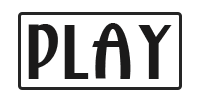
<style>
.page{position:relative;width:200px;height:100px;background:#ffffff}
.page>*{position:absolute;margin:0}
.t1{font:60px "KalenderblattGrotesk";color:#1b1a1a}
</style>
<div class="page">
<p class="t1" style="left:28px;top:23px;width:144px;height:56px">PLAY</p>
</div>
